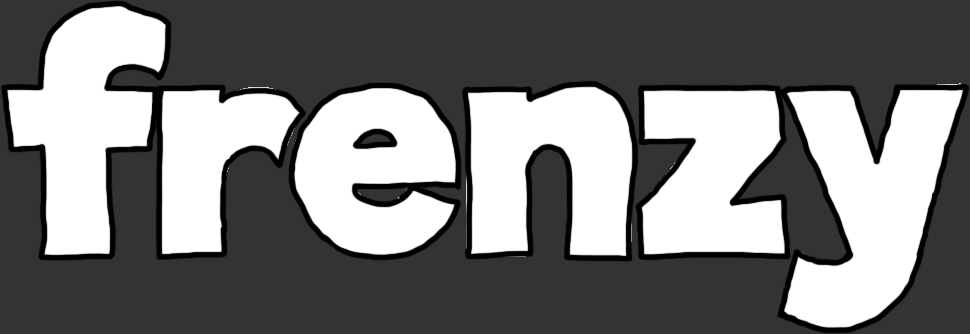
<style>
.page{position:relative;width:970px;height:334px;background:#333333}
.page>*{position:absolute;margin:0}
.t1{font:300px "RifficFree-Bold";color:#ffffff;font-weight:bold}
</style>
<div class="page">
<p class="t1" style="left:5px;top:6px;width:960px;height:324px">frenzy</p>
</div>
